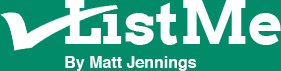
<style>
.page{position:relative;width:281px;height:71px;background:#018b69}
.page>*{position:absolute;margin:0}
.t1{font:16px "Helvetica-Bold";color:#ffffff}
</style>
<div class="page">
<p class="t1" style="left:65px;top:56px;width:132px;height:15px">By Matt Jennings</p>
</div>
